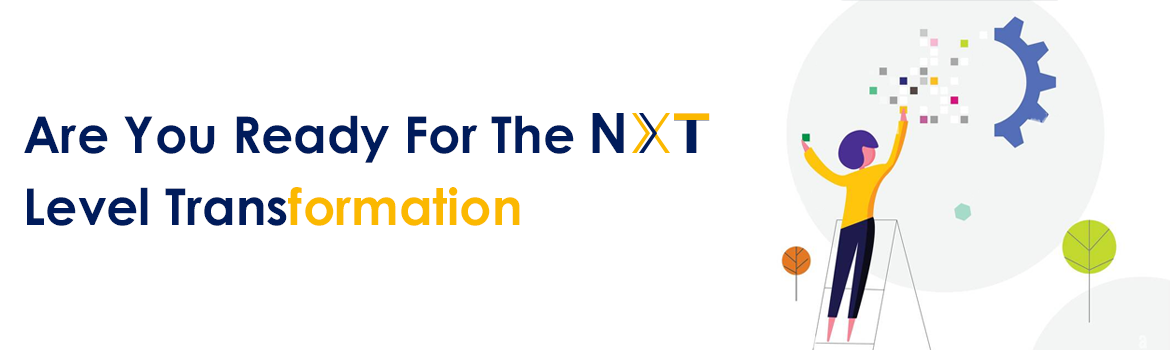
<style>
.page{position:relative;width:1170px;height:350px;background:#ffffff}
.page>*{position:absolute;margin:0}
.t1{font:55.7px "CenturyGothic-Bold";color:#001b5b}
.t2{font:56.8px "LaoUI-Bold";scale:1.12 1}
.t3{font:50.6px/72.8px "CenturyGothic-Bold";color:#001b5b}
.t4{font:50.6px/72.8px "CenturyGothic-Bold";color:#fbb800}
</style>
<div class="page">
<p class="t1" style="left:592px;top:113px;width:32px;height:40px">N</p>
<p class="t2" style="left:674px;top:113px;width:36px;height:40px">T</p>
<p class="t3" style="left:24px;top:115px;width:550px;height:111px">Are You Ready For The<br>Level Trans<span class="t4">formation</span></p>
</div>
